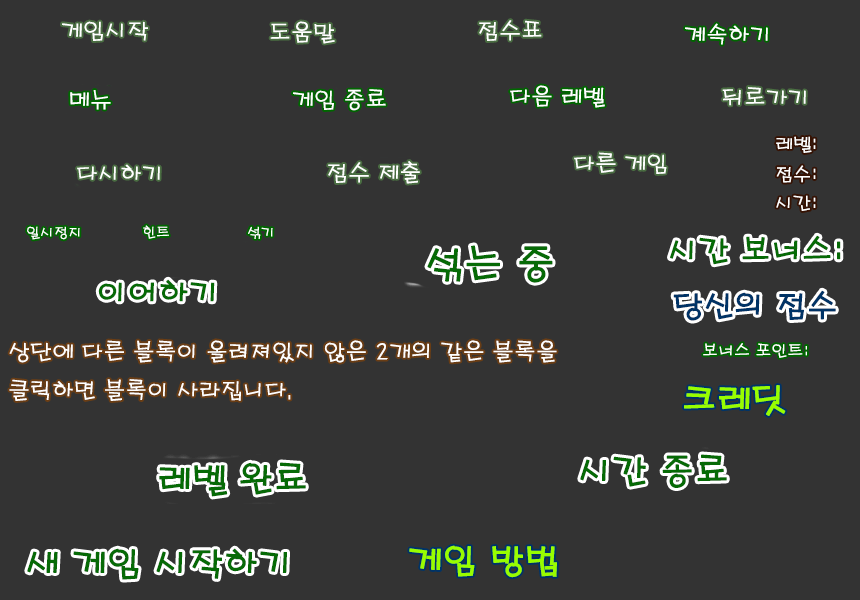
<style>
.page{position:relative;width:860px;height:600px;background:#333333}
.page>*{position:absolute;margin:0}
.t1{font:22px "H2porL";color:#ffffff}
.t2{font:18px "H2porL";color:#ffffff}
.t3{font:14px "H2porL";color:#ffffff}
.t4{font:38px "H2porL";color:#066a06;font-weight:bold}
.t5{font:30px "H2porL";color:#066a06;font-weight:bold}
.t6{font:30px "H2porL";color:#003366;font-weight:bold}
.t7{font:16px "H2porL";color:#ffffff}
.t8{font:34px "H2porL";color:#98fe00;font-weight:bold}
.t9{font:34px "H2porL";color:#066a06;font-weight:bold}
</style>
<div class="page">
<p class="t1" style="left:62px;top:21px;width:86px;height:20px">게임시작</p>
<p class="t1" style="left:270px;top:21px;width:65px;height:23px">도움말</p>
<p class="t1" style="left:479px;top:20px;width:63px;height:21px">점수표</p>
<p class="t1" style="left:685px;top:23px;width:83px;height:22px">계속하기</p>
<p class="t1" style="left:293px;top:89px;width:93px;height:22px">게임 종료</p>
<p class="t1" style="left:510px;top:85px;width:95px;height:23px">다음 레벨</p>
<p class="t1" style="left:722px;top:87px;width:84px;height:19px">뒤로가기</p>
<p class="t1" style="left:70px;top:90px;width:41px;height:20px">메뉴</p>
<p class="t2" style="left:776px;top:136px;width:40px;height:17px">레벨:</p>
<p class="t1" style="left:328px;top:161px;width:92px;height:23px">점수 제출</p>
<p class="t1" style="left:574px;top:152px;width:93px;height:22px">다른 게임</p>
<p class="t1" style="left:77px;top:164px;width:83px;height:16px">다시하기</p>
<p class="t2" style="left:776px;top:165px;width:40px;height:18px">점수:</p>
<p class="t2" style="left:776px;top:195px;width:40px;height:16px">시간:</p>
<p class="t3" style="left:27px;top:226px;width:53px;height:14px">일시정지</p>
<p class="t3" style="left:143px;top:225px;width:26px;height:14px">힌트</p>
<p class="t3" style="left:248px;top:226px;width:25px;height:13px">섞기</p>
<p class="t4" style="left:427px;top:245px;width:126px;height:38px">섞는 중</p>
<p class="t5" style="left:670px;top:235px;width:171px;height:30px">시간 보너스:</p>
<p class="t5" style="left:98px;top:279px;width:117px;height:23px">이어하기</p>
<p class="t6" style="left:673px;top:290px;width:163px;height:31px">당신의 점수</p>
<p class="t1" style="left:9px;top:340px;width:548px;height:61px">상단에 다른 블록이 올려져있지 않은 2개의 같은 블록을<br>클릭하면 블록이 사라집니다.</p>
<p class="t7" style="left:703px;top:343px;width:104px;height:15px">보너스 포인트:</p>
<p class="t8" style="left:684px;top:385px;width:102px;height:31px">크레딧</p>
<p class="t9" style="left:159px;top:462px;width:147px;height:35px">레벨 완료</p>
<p class="t9" style="left:580px;top:454px;width:147px;height:34px">시간 종료</p>
<p class="t8" style="left:409px;top:545px;width:148px;height:33px">게임 방법</p>
<p class="t9" style="left:27px;top:548px;width:260px;height:32px">새 게임 시작하기</p>
</div>
